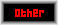
<style>
.page{position:relative;width:58px;height:25px;background:#000000}
.page>*{position:absolute;margin:0}
.t1{font:10px "04b19";color:#ff0000}
</style>
<div class="page">
<p class="t1" style="left:15px;top:9px;width:29px;height:8px">Other</p>
</div>
